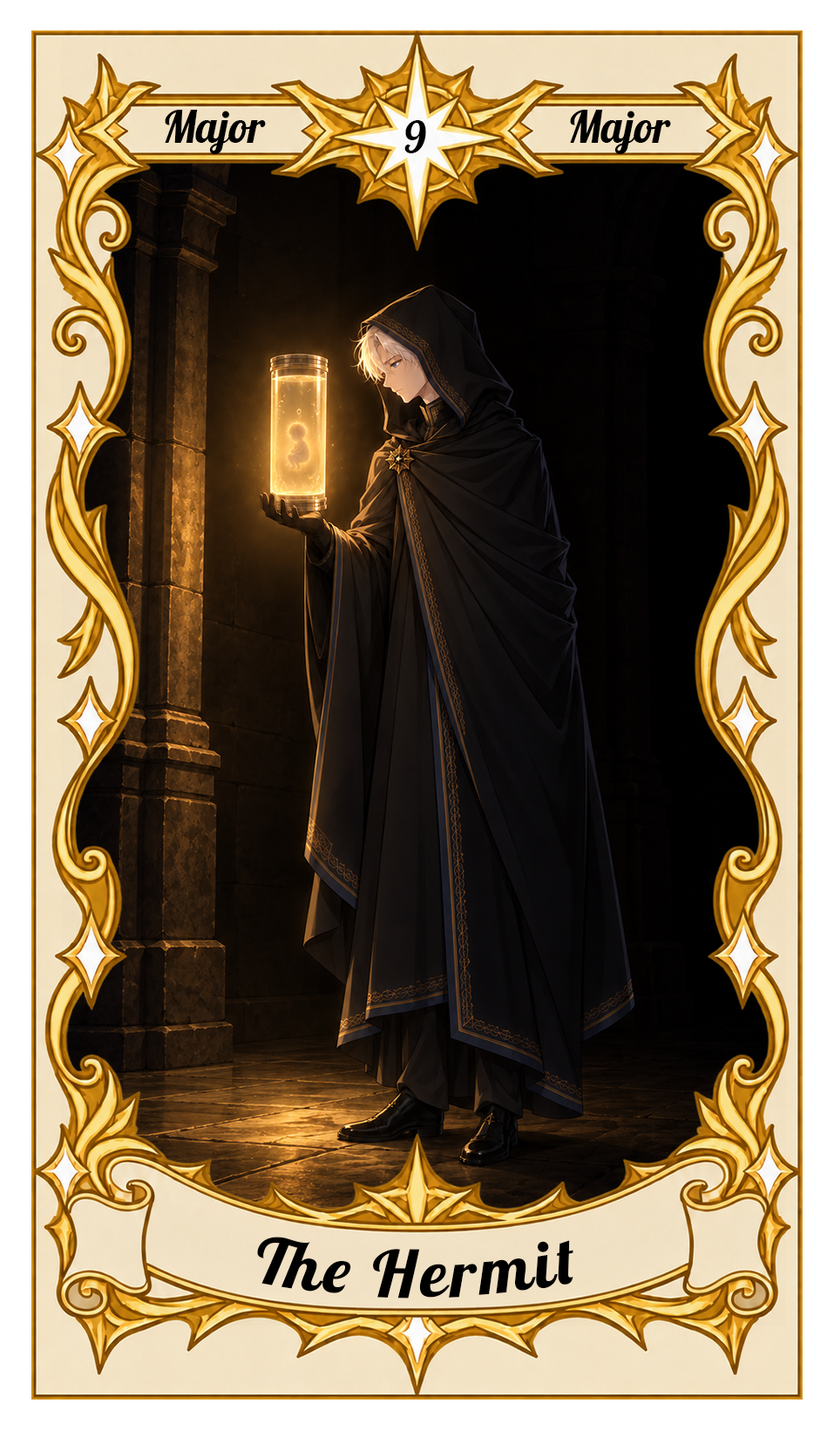
<style>
.page{position:relative;width:834px;height:1430px}
.page>*{position:absolute;margin:0}
.t1{font:43.6px "Lobster-Regular";color:#000000}
.t2{font:65.3px "Lobster-Regular";letter-spacing:0.05em;color:#000000}
</style>
<div class="page">
<p class="t1" style="left:165px;top:110px;width:101px;height:44px">Major</p>
<p class="t1" style="left:570px;top:110px;width:101px;height:44px">Major</p>
<p class="t1" style="left:404px;top:120px;width:22px;height:33px">9</p>
<p class="t2" style="left:257px;top:1237px;width:316px;height:62px">The Hermit</p>
</div>
